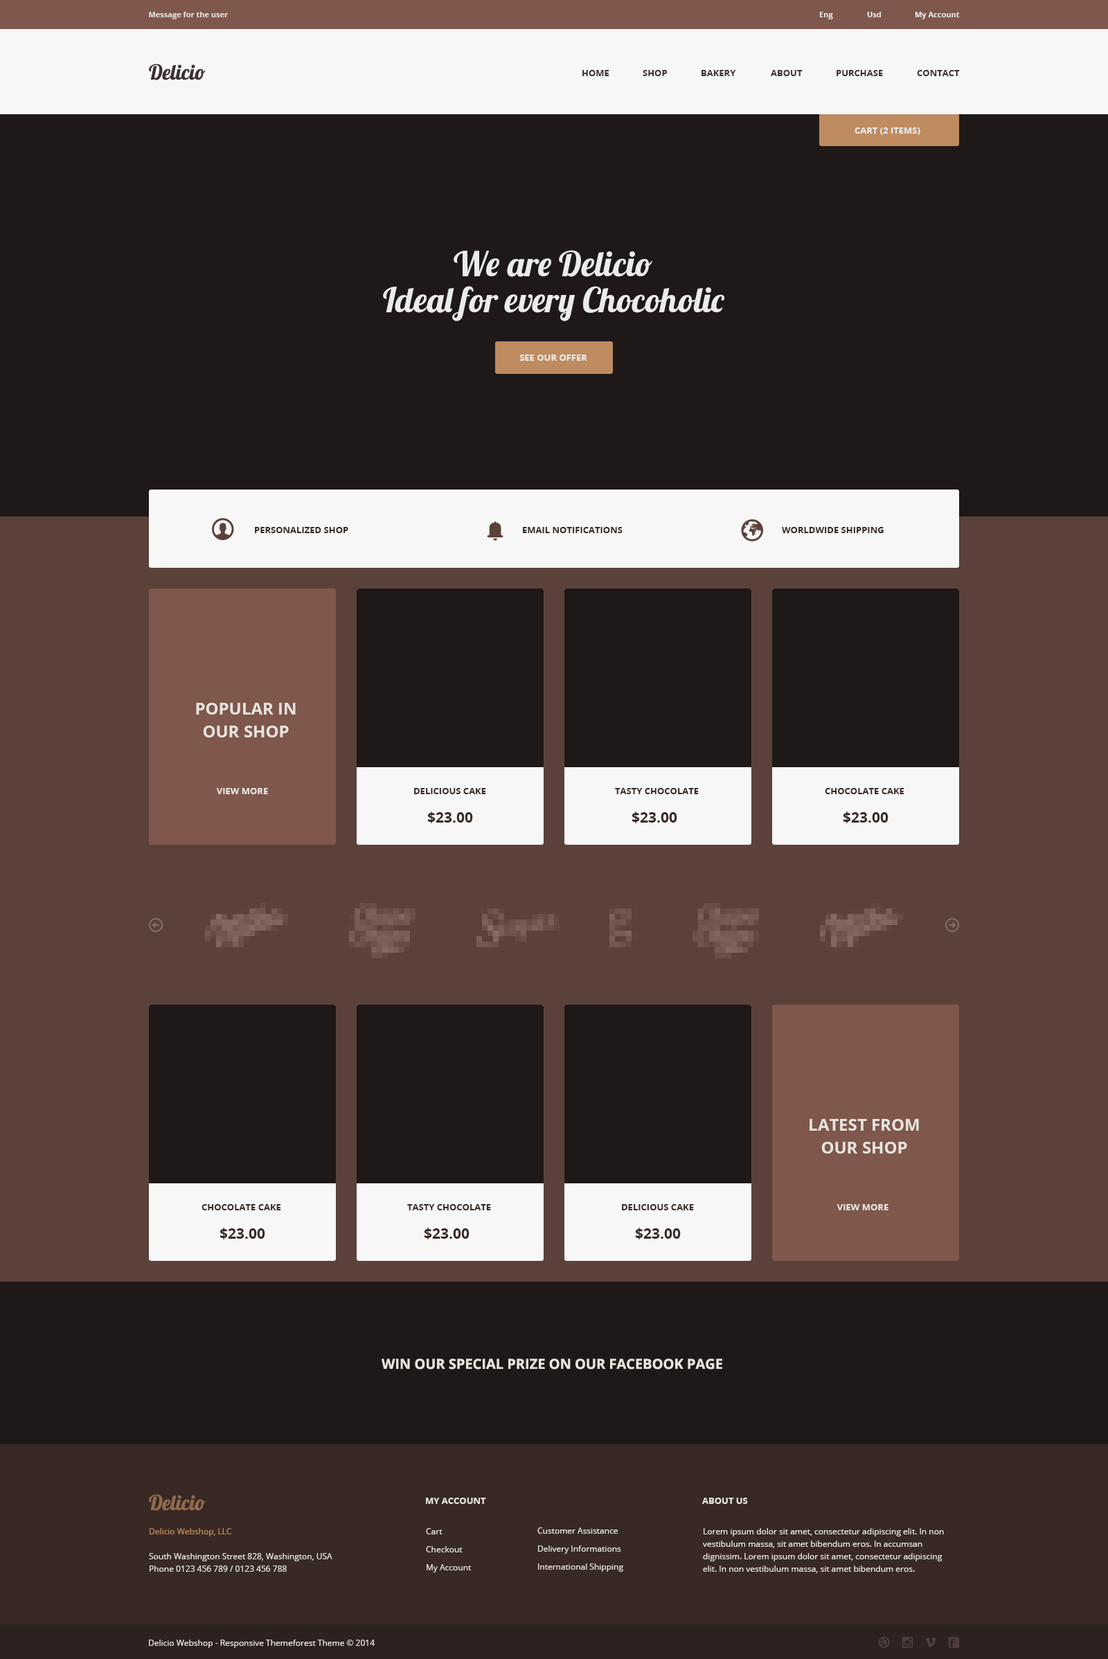
<style>
.page{position:relative;width:1108px;height:1659px;background:#1e1918}
.page>*{position:absolute;margin:0}
.t1{font:7.6px "OpenSans-Bold";color:#e7e5de}
.t2{font:7.6px "OpenSans-Bold";color:#ebebeb}
.t3{font:20.8px "Lobster1.4";color:#3c2f33}
.t4{font:9px "OpenSans-Bold";color:#3c2f33}
.t5{font:9px "OpenSans-Bold";color:#ebebeb}
.t6{font:34.6px/36px "Lobster1.4";color:#ebebeb}
.t7{font:9px "OpenSans-Bold";color:#382925}
.t8{font:16.6px/22.8px "OpenSans-Bold";color:#e7e5de}
.t9{font:9px "OpenSans-Bold";color:#e7e5de}
.t10{font:14.5px "OpenSans-Bold";color:#382925}
.t11{font:13.8px "OpenSans-Bold";color:#e7e5de}
.t12{font:20.8px "Lobster1.4";color:#926b4c}
.t13{font:8.3px/12.5px "OpenSans";color:#e7e5de}
.t14{font:8.3px/12.5px "OpenSans";color:#be8c60}
.t15{font:8.3px/18px "OpenSans";color:#e7e5de}
.t16{font:8.3px "OpenSans";color:#e7e5de}
</style>
<div class="page">
<p class="t1" style="left:149px;top:12px;width:79px;height:7px">Message for the user</p>
<p class="t2" style="left:819px;top:12px;width:14px;height:7px">Eng</p>
<p class="t2" style="left:867px;top:12px;width:14px;height:5px">Usd</p>
<p class="t2" style="left:915px;top:12px;width:45px;height:7px">My Account</p>
<p class="t3" style="left:149px;top:64px;width:57px;height:16px">Delicio</p>
<p class="t4" style="left:582px;top:70px;width:27px;height:6px">HOME</p>
<p class="t4" style="left:642px;top:70px;width:25px;height:6px">SHOP</p>
<p class="t4" style="left:701px;top:70px;width:35px;height:6px">BAKERY</p>
<p class="t4" style="left:771px;top:70px;width:31px;height:6px">ABOUT</p>
<p class="t4" style="left:836px;top:70px;width:47px;height:6px">PURCHASE</p>
<p class="t4" style="left:917px;top:70px;width:43px;height:6px">CONTACT</p>
<p class="t5" style="left:854px;top:127px;width:66px;height:8px">CART (2 ITEMS)</p>
<p class="t6" style="left:383px;top:250px;width:341px;height:71px;text-align:center">We are Delicio<br>Ideal for every Chocoholic</p>
<p class="t5" style="left:519px;top:354px;width:68px;height:7px">SEE OUR OFFER</p>
<p class="t7" style="left:255px;top:527px;width:93px;height:6px">PERSONALIZED SHOP</p>
<p class="t7" style="left:523px;top:527px;width:99px;height:6px">EMAIL NOTIFICATIONS</p>
<p class="t7" style="left:782px;top:527px;width:101px;height:6px">WORLDWIDE SHIPPING</p>
<p class="t8" style="left:196px;top:703px;width:100px;height:34px;text-align:center">POPULAR IN<br>OUR SHOP</p>
<p class="t9" style="left:216px;top:788px;width:52px;height:6px">VIEW MORE</p>
<p class="t7" style="left:414px;top:788px;width:72px;height:6px">DELICIOUS CAKE</p>
<p class="t7" style="left:615px;top:788px;width:84px;height:6px">TASTY CHOCOLATE</p>
<p class="t7" style="left:825px;top:788px;width:79px;height:6px">CHOCOLATE CAKE</p>
<p class="t10" style="left:427px;top:811px;width:46px;height:12px">$23.00</p>
<p class="t10" style="left:631px;top:811px;width:46px;height:12px">$23.00</p>
<p class="t10" style="left:843px;top:811px;width:45px;height:12px">$23.00</p>
<p class="t8" style="left:809px;top:1119px;width:110px;height:34px;text-align:center">LATEST FROM<br>OUR SHOP</p>
<p class="t7" style="left:201px;top:1204px;width:80px;height:6px">CHOCOLATE CAKE</p>
<p class="t7" style="left:407px;top:1204px;width:84px;height:6px">TASTY CHOCOLATE</p>
<p class="t7" style="left:622px;top:1204px;width:72px;height:6px">DELICIOUS CAKE</p>
<p class="t9" style="left:836px;top:1204px;width:52px;height:6px">VIEW MORE</p>
<p class="t10" style="left:219px;top:1227px;width:46px;height:12px">$23.00</p>
<p class="t10" style="left:424px;top:1227px;width:45px;height:12px">$23.00</p>
<p class="t10" style="left:635px;top:1227px;width:46px;height:12px">$23.00</p>
<p class="t11" style="left:381px;top:1358px;width:341px;height:11px">WIN OUR SPECIAL PRIZE ON OUR FACEBOOK PAGE</p>
<p class="t12" style="left:149px;top:1494px;width:57px;height:17px">Delicio</p>
<p class="t9" style="left:426px;top:1497px;width:60px;height:7px">MY ACCOUNT</p>
<p class="t9" style="left:702px;top:1497px;width:46px;height:7px">ABOUT US</p>
<p class="t13" style="left:149px;top:1528px;width:183px;height:44px"><span class="t14">Delicio Webshop, LLC<br><br></span>South Washington Street 828, Washington, USA <br>Phone 0123 456 789 / 0123 456 788</p>
<p class="t15" style="left:426px;top:1528px;width:45px;height:44px">Cart         <br>Checkout<br>My Account</p>
<p class="t15" style="left:537px;top:1527px;width:86px;height:45px">Customer Assistance<br>Delivery Informations<br>International Shipping</p>
<p class="t13" style="left:703px;top:1528px;width:241px;height:45px">Lorem ipsum dolor sit amet, consectetur adipiscing elit. In non vestibulum massa, sit amet bibendum eros. In accumsan dignissim. Lorem ipsum dolor sit amet, consectetur adipiscing elit. In non vestibulum massa, sit amet bibendum eros.</p>
<p class="t16" style="left:149px;top:1639px;width:226px;height:9px">Delicio Webshop - Responsive Themeforest Theme © 2014</p>
</div>
